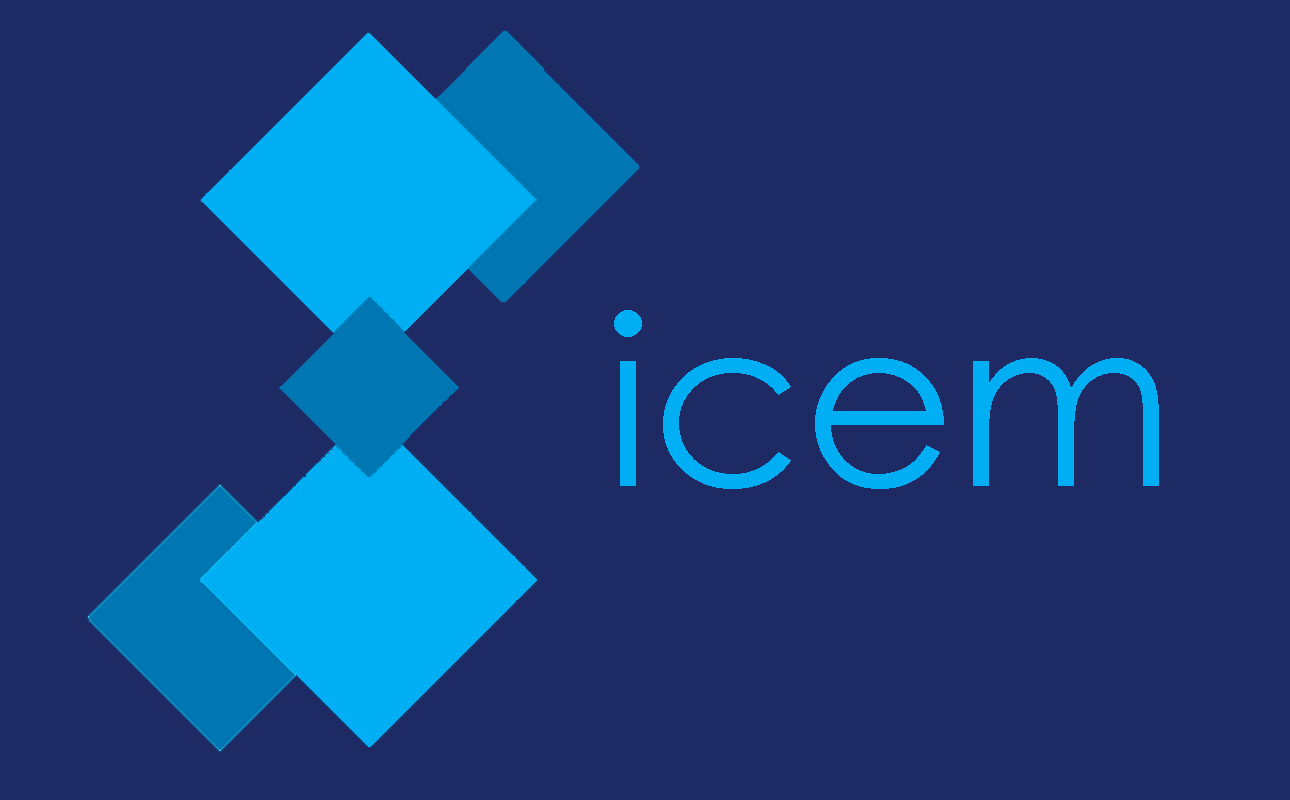
<style>
.page{position:relative;width:1290px;height:800px;background:#1d2a63}
.page>*{position:absolute;margin:0}
.t1{font:235.1px "CenturyGothic";color:#00aef3}
</style>
<div class="page">
<p class="t1" style="left:614px;top:310px;width:545px;height:179px">icem</p>
</div>
